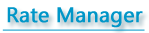
<style>
.page{position:relative;width:149px;height:33px;background:#ffffff}
.page>*{position:absolute;margin:0}
.t1{font:21px "LaoUI";color:#0096c8;font-weight:bold}
</style>
<div class="page">
<p class="t1" style="left:7px;top:7px;width:136px;height:21px">Rate Manager</p>
</div>
